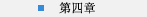
<style>
.page{position:relative;width:147px;height:17px;background:#f1f1f1}
.page>*{position:absolute;margin:0}
.t1{font:12px "SimSun";color:#000000;font-weight:bold}
</style>
<div class="page">
<p class="t1" style="left:39px;top:0px;width:77px;height:17px">第四章</p>
</div>
